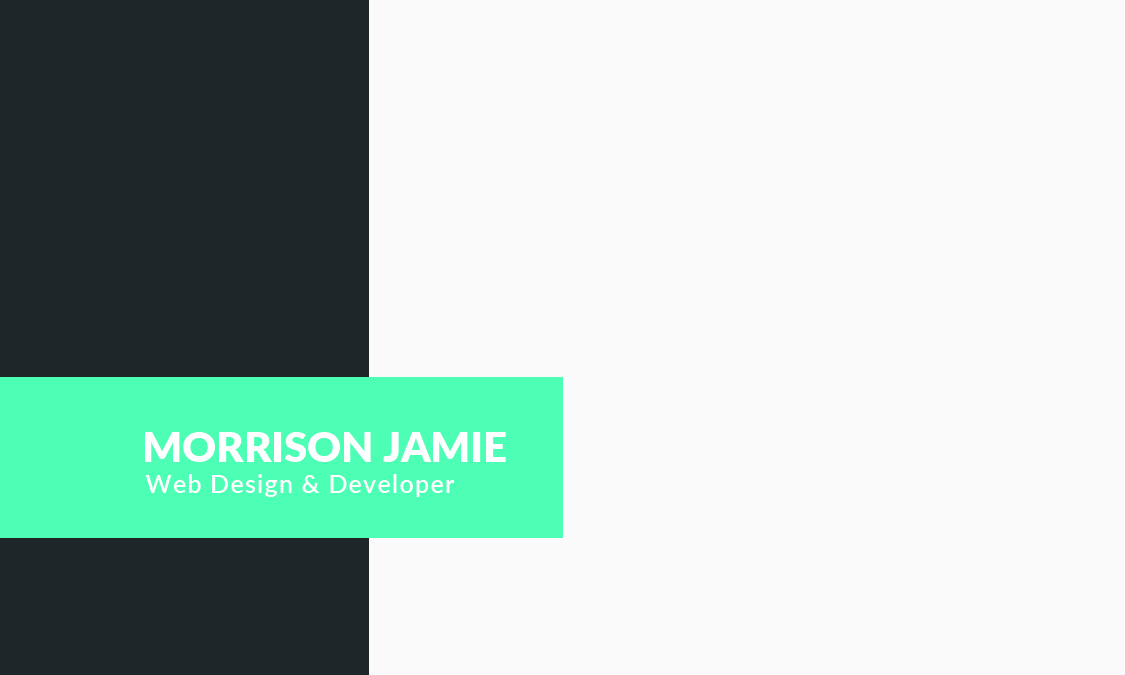
<style>
.page{position:relative;width:1125px;height:675px;background:#fafafa}
.page>*{position:absolute;margin:0}
.t1{font:41.7px "Lato-Black";color:#ffffff;text-transform:uppercase}
.t2{font:25px "Lato-Semibold";letter-spacing:0.05em;color:#ffffff}
</style>
<div class="page">
<p class="t1" style="left:145px;top:432px;width:361px;height:30px">MORRISON JAMIE</p>
<p class="t2" style="left:145px;top:474px;width:310px;height:23px">Web Design &amp; Developer</p>
</div>
